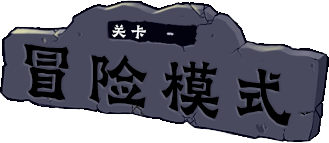
<style>
.page{position:relative;width:329px;height:143px;background:#494a5e}
.page>*{position:absolute;margin:0}
.t1{font:18.1px "GraveBustedStoneLishuSCRoughlyC";letter-spacing:0.14em;color:#ffffff;scale:1.03 1}
.t2{font:74.6px "GraveBustedStoneLishuSCRoughlyC";letter-spacing:0.14em;color:#000000;scale:0.93 1}
</style>
<div class="page">
<p class="t1" style="left:112px;top:24px;width:34px;height:15px;rotate:3deg">关卡</p>
<p class="t2" style="left:24px;top:44px;width:267px;height:82px;rotate:6deg">冒险模式</p>
</div>
